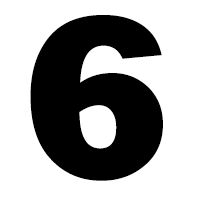
<style>
.page{position:relative;width:200px;height:200px;background:#ffffff}
.page>*{position:absolute;margin:0}
.t1{font:236.9px "Rockwell-ExtraBold";color:#000000}
</style>
<div class="page">
<p class="t1" style="left:30px;top:15px;width:133px;height:166px">6</p>
</div>
